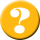
<style>
.page{position:relative;width:40px;height:40px;background:#feb811}
.page>*{position:absolute;margin:0}
.t1{font:36px "Bodoni-Poster";color:#ffffff}
</style>
<div class="page">
<p class="t1" style="left:10px;top:7px;width:20px;height:27px">?</p>
</div>
